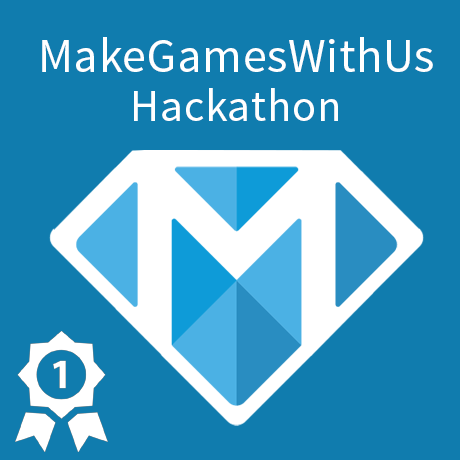
<style>
.page{position:relative;width:460px;height:460px;background:#107cae}
.page>*{position:absolute;margin:0}
.t1{font:48px "SourceSansPro-Regular";letter-spacing:0.015em;color:#ffffff}
.t2{font:45px "SourceSansPro-Regular";letter-spacing:0.015em;color:#ffffff}
</style>
<div class="page">
<p class="t1" style="left:42px;top:37px;width:391px;height:35px">MakeGamesWithUs</p>
<p class="t2" style="left:134px;top:88px;width:204px;height:33px">Hackathon</p>
</div>
